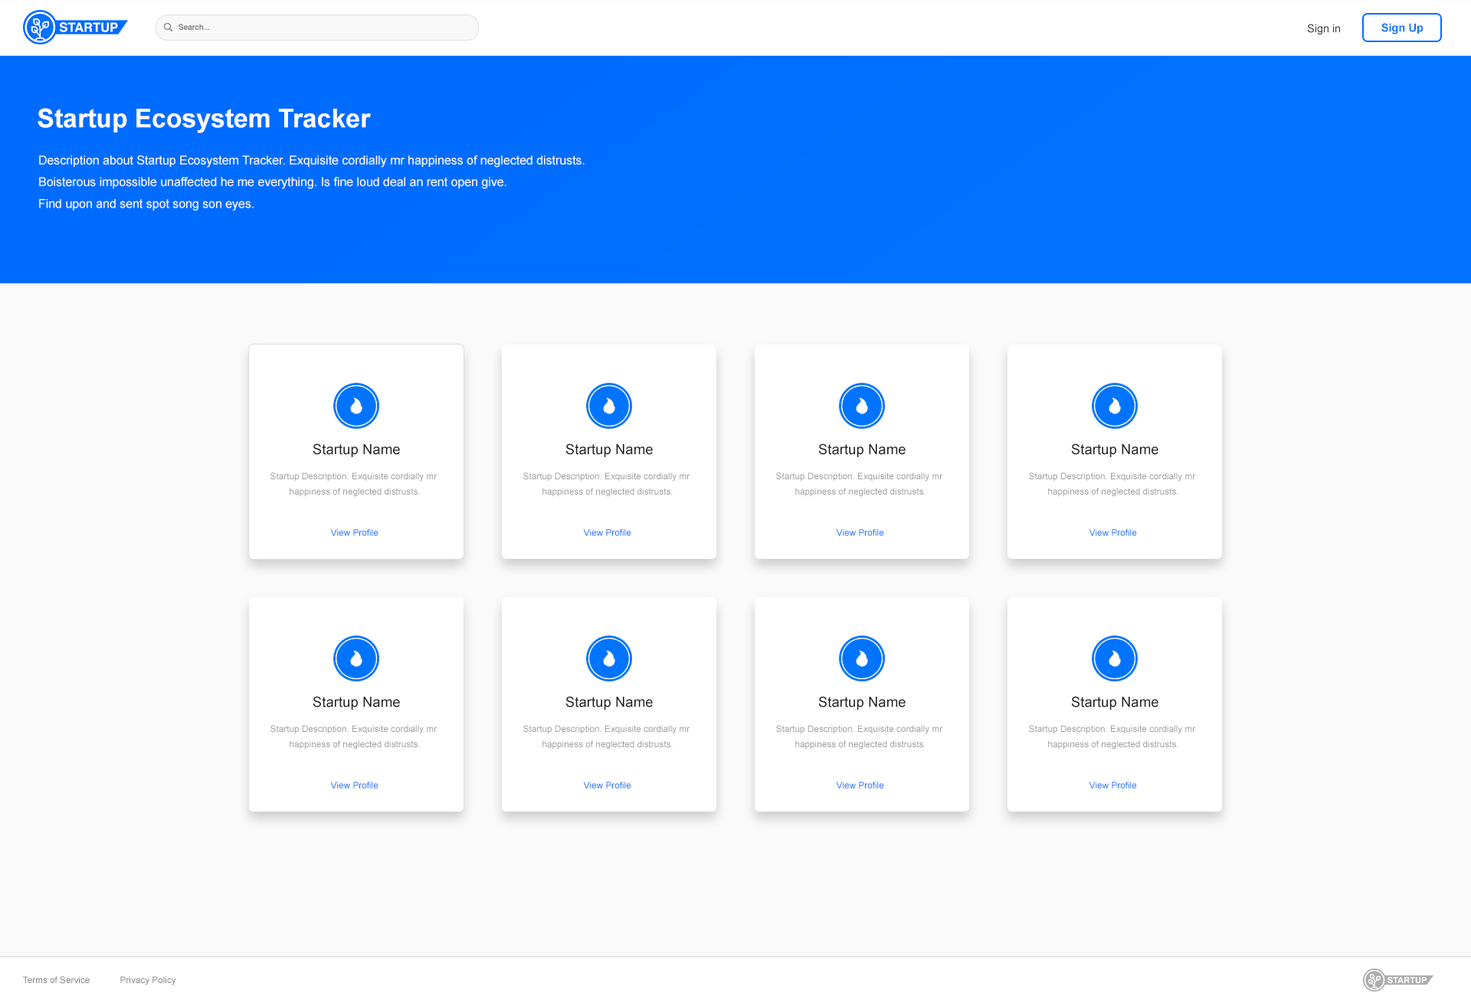
<style>
.page{position:relative;width:1471px;height:1003px;background:#fafafa}
.page>*{position:absolute;margin:0}
.t1{font:7.7px "Helvetica-Bold";color:#797979}
.t2{font:11px "ArialMT";color:#3e3e3e}
.t3{font:11.2px "Arial-BoldMT";color:#0072ff}
.t4{font:25.8px "Arial-BoldMT";color:#ffffff}
.t5{font:12.2px/21.8px "ArialMT";color:#f9f9f9}
.t6{font:14.2px "ArialMT";color:#232323}
.t7{font:9px/15.4px "ArialMT";color:#9f9f9f}
.t8{font:9px "ArialMT";color:#006cff}
.t9{font:9px "ArialMT";color:#828282}
</style>
<div class="page">
<p class="t1" style="left:178px;top:24px;width:31px;height:6px">Search...</p>
<p class="t2" style="left:1307px;top:24px;width:33px;height:11px">Sign in</p>
<p class="t3" style="left:1381px;top:23px;width:42px;height:11px">Sign Up</p>
<p class="t4" style="left:38px;top:108px;width:333px;height:25px">Startup Ecosystem Tracker</p>
<p class="t5" style="left:39px;top:155px;width:545px;height:56px">Description about Startup Ecosystem Tracker. Exquisite cordially mr happiness of neglected distrusts.<br>Boisterous impossible unaffected he me everything. Is fine loud deal an rent open give. <br>Find upon and sent spot song son eyes.</p>
<p class="t6" style="left:313px;top:443px;width:87px;height:14px">Startup Name</p>
<p class="t6" style="left:565px;top:443px;width:88px;height:14px">Startup Name</p>
<p class="t6" style="left:818px;top:443px;width:87px;height:14px">Startup Name</p>
<p class="t6" style="left:1071px;top:443px;width:87px;height:14px">Startup Name</p>
<p class="t7" style="left:270px;top:473px;width:167px;height:24px;text-align:center">Startup Description. Exquisite cordially mr <br>happiness of neglected distrusts.</p>
<p class="t7" style="left:523px;top:473px;width:167px;height:24px;text-align:center">Startup Description. Exquisite cordially mr <br>happiness of neglected distrusts.</p>
<p class="t7" style="left:776px;top:473px;width:167px;height:24px;text-align:center">Startup Description. Exquisite cordially mr <br>happiness of neglected distrusts.</p>
<p class="t7" style="left:1029px;top:473px;width:167px;height:24px;text-align:center">Startup Description. Exquisite cordially mr <br>happiness of neglected distrusts.</p>
<p class="t8" style="left:330px;top:529px;width:48px;height:7px">View Profile</p>
<p class="t8" style="left:583px;top:529px;width:48px;height:7px">View Profile</p>
<p class="t8" style="left:836px;top:529px;width:48px;height:7px">View Profile</p>
<p class="t8" style="left:1088px;top:529px;width:49px;height:7px">View Profile</p>
<p class="t6" style="left:313px;top:696px;width:87px;height:14px">Startup Name</p>
<p class="t6" style="left:565px;top:696px;width:88px;height:14px">Startup Name</p>
<p class="t6" style="left:818px;top:696px;width:87px;height:14px">Startup Name</p>
<p class="t6" style="left:1071px;top:696px;width:87px;height:14px">Startup Name</p>
<p class="t7" style="left:270px;top:725px;width:167px;height:25px;text-align:center">Startup Description. Exquisite cordially mr <br>happiness of neglected distrusts.</p>
<p class="t7" style="left:523px;top:725px;width:167px;height:25px;text-align:center">Startup Description. Exquisite cordially mr <br>happiness of neglected distrusts.</p>
<p class="t7" style="left:776px;top:725px;width:167px;height:25px;text-align:center">Startup Description. Exquisite cordially mr <br>happiness of neglected distrusts.</p>
<p class="t7" style="left:1029px;top:725px;width:167px;height:25px;text-align:center">Startup Description. Exquisite cordially mr <br>happiness of neglected distrusts.</p>
<p class="t8" style="left:330px;top:782px;width:48px;height:7px">View Profile</p>
<p class="t8" style="left:583px;top:782px;width:48px;height:7px">View Profile</p>
<p class="t8" style="left:836px;top:782px;width:48px;height:7px">View Profile</p>
<p class="t8" style="left:1088px;top:782px;width:49px;height:7px">View Profile</p>
<p class="t9" style="left:23px;top:977px;width:67px;height:7px">Terms of Service</p>
<p class="t9" style="left:120px;top:977px;width:56px;height:9px">Privacy Policy</p>
</div>
